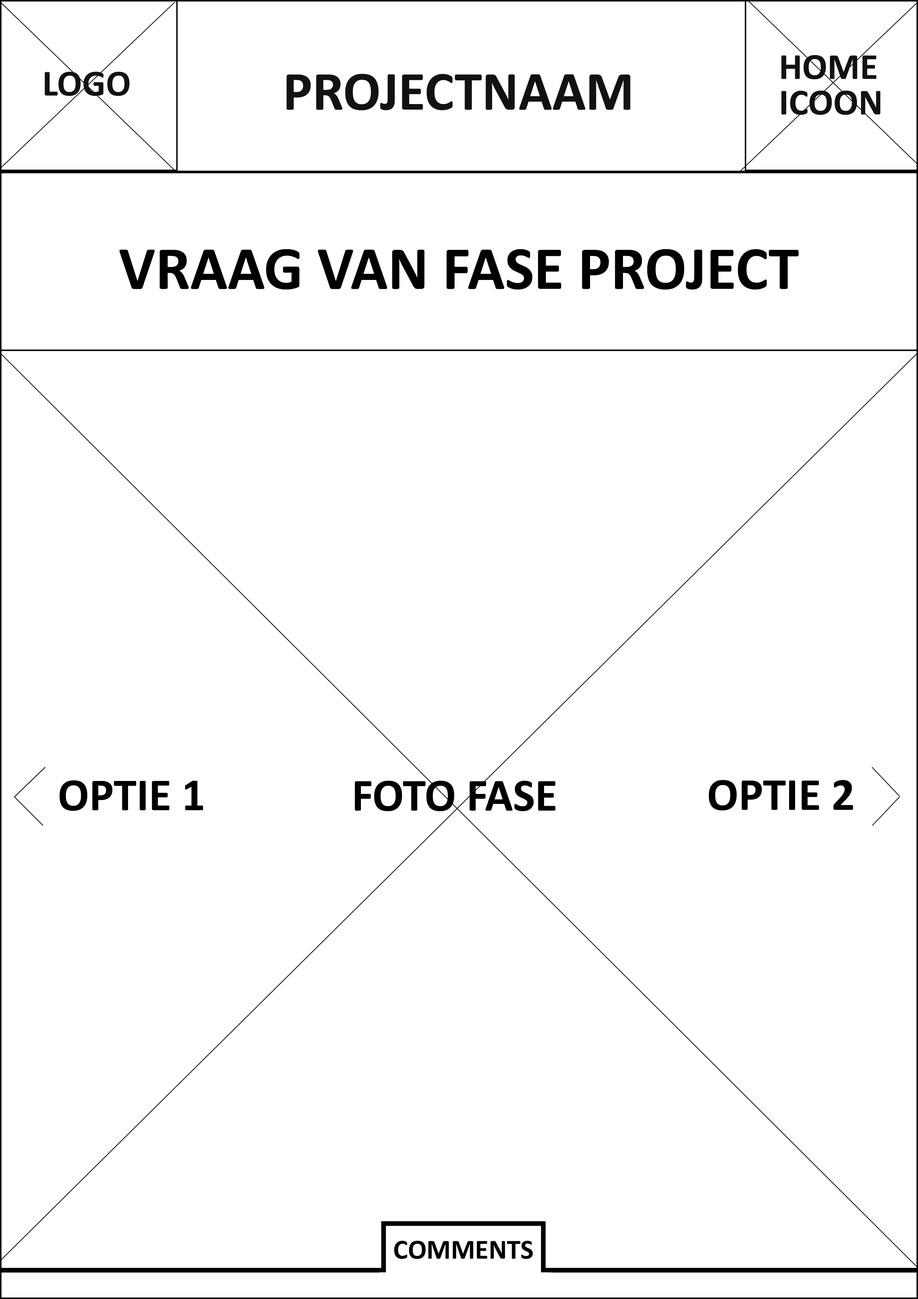
<style>
.page{position:relative;width:918px;height:1299px;background:#ffffff}
.page>*{position:absolute;margin:0}
.t1{font:37px/35.4px "Calibri-Bold";color:#121212}
.t2{font:37px "Calibri-Bold";color:#121212}
.t3{font:55.5px "Calibri-Bold";color:#121212}
.t4{font:61.7px "Calibri-Bold";color:#000000}
.t5{font:46.3px "Calibri-Bold";color:#000000}
.t6{font:46.4px "Calibri-Bold";color:#000000}
.t7{font:27.8px "Calibri-Bold";color:#000000}
</style>
<div class="page">
<p class="t1" style="left:782px;top:55px;width:99px;height:60px">HOME<br>ICOON</p>
<p class="t2" style="left:45px;top:71px;width:85px;height:25px">LOGO</p>
<p class="t3" style="left:287px;top:74px;width:343px;height:36px">PROJECTNAAM</p>
<p class="t4" style="left:119px;top:249px;width:680px;height:41px">VRAAG VAN FASE PROJECT</p>
<p class="t5" style="left:60px;top:780px;width:143px;height:31px">OPTIE 1</p>
<p class="t6" style="left:355px;top:780px;width:201px;height:31px">FOTO FASE</p>
<p class="t5" style="left:709px;top:780px;width:144px;height:30px">OPTIE 2</p>
<p class="t7" style="left:394px;top:1240px;width:139px;height:19px">COMMENTS</p>
</div>
